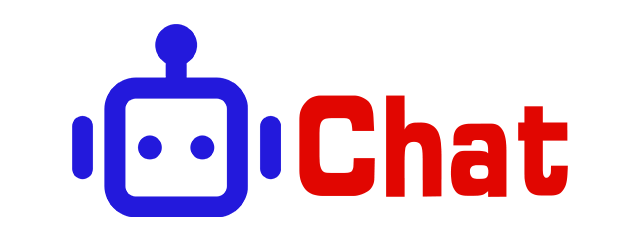
<style>
.page{position:relative;width:640px;height:240px;background:#ffffff}
.page>*{position:absolute;margin:0}
.t1{font:134.8px "FZZIYHS--GB1-0";color:#e10601;scale:0.8 1}
</style>
<div class="page">
<p class="t1" style="left:299px;top:95px;width:269px;height:102px">Chat</p>
</div>
